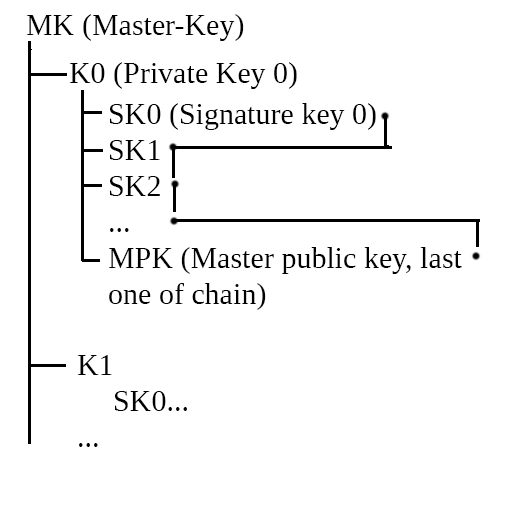
<style>
.page{position:relative;width:512px;height:512px;background:#ffffff}
.page>*{position:absolute;margin:0}
.t1{font:30px "LiberationSerif";color:#000000}
</style>
<div class="page">
<p class="t1" style="left:26px;top:14px;width:218px;height:27px">MK (Master-Key)</p>
<p class="t1" style="left:69px;top:62px;width:228px;height:27px">K0 (Private Key 0)</p>
<p class="t1" style="left:108px;top:103px;width:354px;height:207px">SK0 (Signature key 0)<br>SK1<br>SK2<br>...<br>MPK (Master public key, last <br>one of chain)</p>
<p class="t1" style="left:77px;top:355px;width:110px;height:92px">K1<br> SK0...<br>...</p>
</div>
